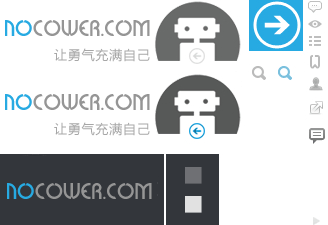
<style>
.page{position:relative;width:328px;height:225px;background:#ffffff}
.page>*{position:absolute;margin:0}
.t1{font:20px "Sabomaster";letter-spacing:0.02em;color:#959595}
.t2{font:20px "Sabomaster";letter-spacing:0.02em;color:#27aae2}
.t3{font:13px "MicrosoftYaHei";letter-spacing:0.06em;color:#a7a7a7}
</style>
<div class="page">
<p class="t1" style="left:5px;top:20px;width:145px;height:16px"><span class="t2">NO</span>COWER.COM</p>
<p class="t3" style="left:54px;top:48px;width:96px;height:14px">让勇气充满自己</p>
<p class="t1" style="left:5px;top:94px;width:145px;height:16px"><span class="t2">NO</span>COWER.COM</p>
<p class="t3" style="left:54px;top:122px;width:96px;height:14px">让勇气充满自己</p>
<p class="t1" style="left:7px;top:183px;width:145px;height:16px"><span class="t2">NO</span>COWER.COM</p>
</div>
